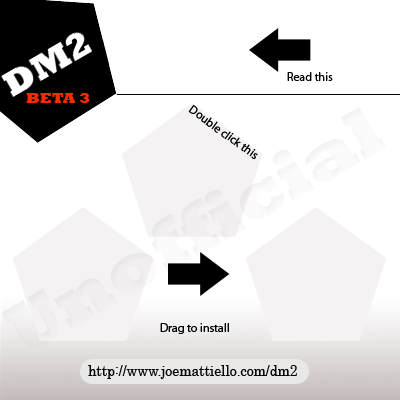
<style>
.page{position:relative;width:400px;height:400px;background:#ffffff}
.page>*{position:absolute;margin:0}
.t1{font:12px "MyriadPro-Regular";color:#000000}
.t2{font:14px "Rockwell-ExtraBold";color:#fa2900;scale:1.15 1}
.t3{font:14.9px "Century";color:#060606;scale:0.93 1}
</style>
<div class="page">
<p class="t1" style="left:287px;top:72px;width:46px;height:9px">Read this</p>
<p class="t2" style="left:26px;top:93px;width:64px;height:10px">BETA 3</p>
<p class="t1" style="left:188px;top:105px;width:70px;height:54px;rotate:36deg">Double click this</p>
<p class="t1" style="left:160px;top:323px;width:69px;height:11px">Drag to install</p>
<p class="t3" style="left:88px;top:365px;width:209px;height:14px">http://www.joemattiello.com/dm2</p>
</div>
